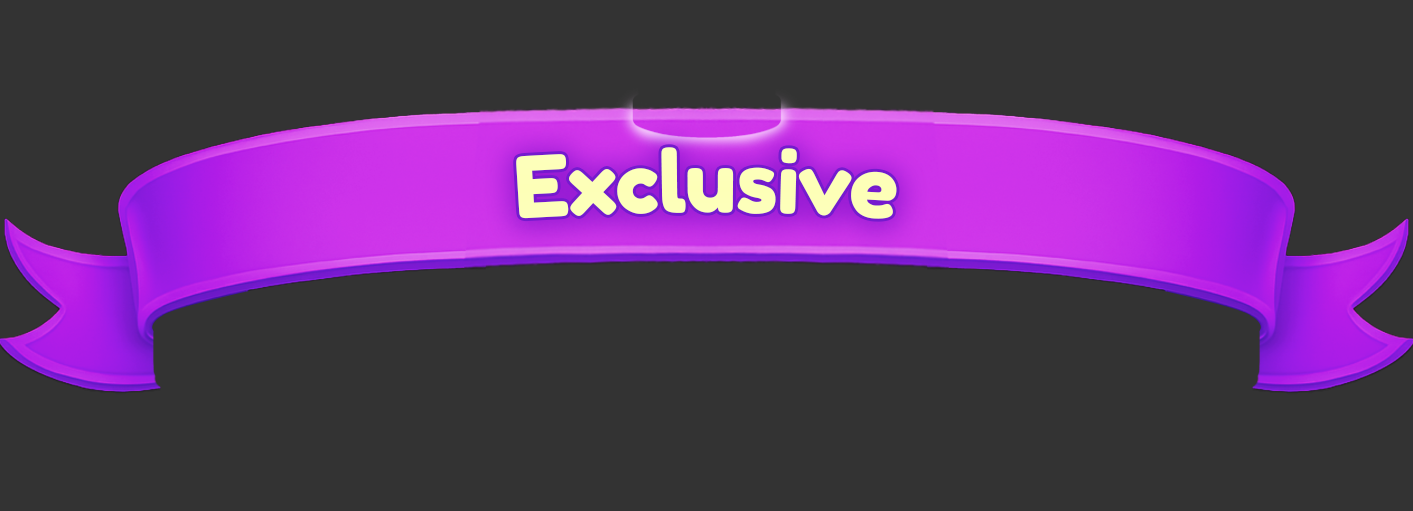
<style>
.page{position:relative;width:1413px;height:511px;background:#333333}
.page>*{position:absolute;margin:0}
.t1{font:84.6px "FredokaOne-Regular";letter-spacing:-0.01em;color:#fdffb9}
</style>
<div class="page">
<p class="t1" style="left:516px;top:147px;width:381px;height:72px">Exclusive</p>
</div>
